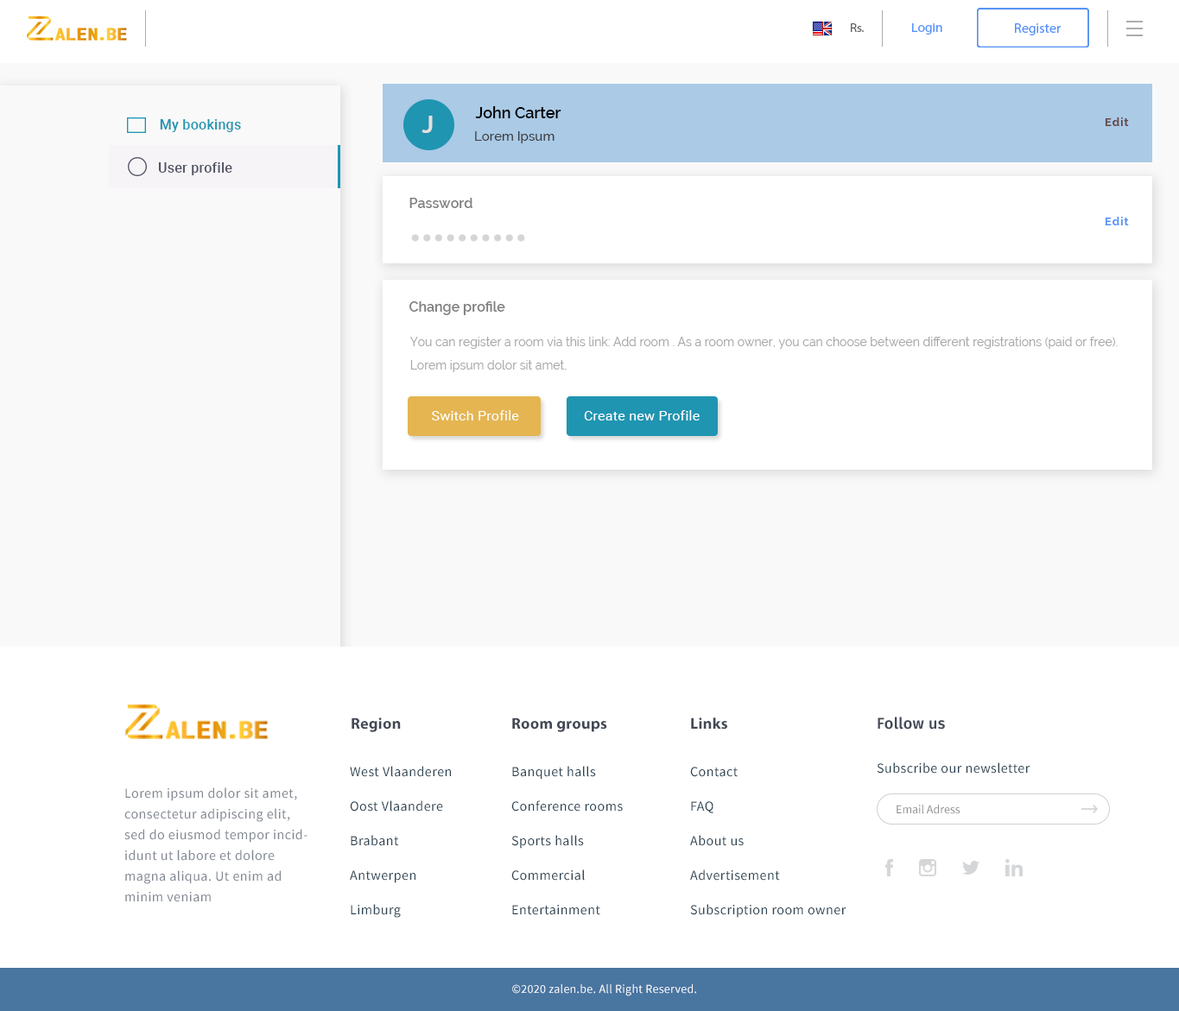
<style>
.page{position:relative;width:1179px;height:1011px;background:#ffffff}
.page>*{position:absolute;margin:0}
.t1{font:12.2px "MyriadPro-Regular";color:#636363;scale:1.04 1}
.t2{font:12.7px "MyriadPro-Regular";color:#5392f9;scale:1.07 1}
.t3{font:13.8px "MyriadPro-Regular";color:#5392f9}
.t4{font:15.5px "Raleway-SemiBold";color:#000000}
.t5{font:13.7px "Roboto-Medium";letter-spacing:0.02em;color:#1f95b1}
.t6{font:24.5px "Raleway-Bold";color:#e6e0e0}
.t7{font:11.2px "Raleway-Bold";letter-spacing:0.074em;color:#674646}
.t8{font:13px "Raleway-Medium";color:#3c3c3c}
.t9{font:13.7px "Roboto-Medium";letter-spacing:0.02em;color:#525364}
.t10{font:13.8px "Raleway-SemiBold";color:#817f7f}
.t11{font:11.2px "Raleway-Bold";letter-spacing:0.074em;color:#5392f9}
.t12{font:12.1px/23.3px "Raleway-Regular";color:#a8a7a7}
.t13{font:13px "Roboto-Regular";letter-spacing:0.02em;color:#ffffff;scale:1.06 1}
.t14{font:15.5px "MyriadPro-Bold";letter-spacing:0.02em;color:#424955}
.t15{font:15.5px "FiraSans-Medium";letter-spacing:0.02em;color:#424955}
.t16{font:13.8px/34.5px "SourceSansPro-Regular";letter-spacing:0.03em;color:#2e4453}
.t17{font:13.8px "SourceSansPro-Regular";letter-spacing:0.03em;color:#2e4453}
.t18{font:13.8px/20.7px "SourceSansPro-Regular";letter-spacing:0.03em;color:#818791}
.t19{font:12.1px "SourceSansPro-Regular";color:#8c8c8c}
.t20{font:12.1px "SourceSansPro-Regular";letter-spacing:0.02em;color:#ffffff}
</style>
<div class="page">
<p class="t1" style="left:851px;top:23px;width:13px;height:9px">Rs.</p>
<p class="t2" style="left:912px;top:23px;width:30px;height:12px">Login</p>
<p class="t3" style="left:1015px;top:23px;width:46px;height:12px">Register</p>
<p class="t4" style="left:475px;top:106px;width:86px;height:12px">John Carter</p>
<p class="t5" style="left:160px;top:119px;width:81px;height:13px">My bookings</p>
<p class="t6" style="left:421px;top:116px;width:12px;height:17px">J</p>
<p class="t7" style="left:1105px;top:117px;width:24px;height:9px">Edit</p>
<p class="t8" style="left:475px;top:131px;width:80px;height:12px">Lorem Ipsum</p>
<p class="t9" style="left:158px;top:162px;width:74px;height:13px">User profile</p>
<p class="t10" style="left:409px;top:198px;width:63px;height:10px">Password</p>
<p class="t11" style="left:1105px;top:217px;width:24px;height:8px">Edit</p>
<p class="t10" style="left:409px;top:301px;width:96px;height:14px">Change profile</p>
<p class="t12" style="left:409px;top:337px;width:709px;height:35px">You can register a room via this link: Add room . As a room owner, you can choose between different registrations (paid or free). Lorem ipsum dolor sit amet,</p>
<p class="t13" style="left:432px;top:410px;width:87px;height:11px">Switch Profile</p>
<p class="t13" style="left:584px;top:410px;width:116px;height:11px">Create new Profile</p>
<p class="t14" style="left:352px;top:718px;width:49px;height:14px">Region</p>
<p class="t14" style="left:512px;top:718px;width:95px;height:14px">Room groups</p>
<p class="t14" style="left:691px;top:718px;width:36px;height:12px">Links</p>
<p class="t15" style="left:878px;top:717px;width:67px;height:13px">Follow us</p>
<p class="t16" style="left:350px;top:766px;width:101px;height:152px">West Vlaanderen<br>Oost Vlaandere<br>Brabant<br>Antwerpen<br>Limburg</p>
<p class="t16" style="left:511px;top:766px;width:112px;height:150px">Banquet halls<br>Conference rooms<br>Sports halls<br>Commercial<br>Entertainment</p>
<p class="t16" style="left:690px;top:767px;width:156px;height:151px">Contact<br>FAQ<br>About us<br>Advertisement<br>Subscription room owner</p>
<p class="t17" style="left:877px;top:763px;width:153px;height:11px">Subscribe our newsletter</p>
<p class="t18" style="left:124px;top:788px;width:183px;height:115px">Lorem ipsum dolor sit amet, consectetur adipiscing elit, sed do eiusmod tempor incididunt ut labore et dolore magna aliqua. Ut enim ad minim veniam</p>
<p class="t19" style="left:897px;top:805px;width:63px;height:9px">Email Adress</p>
<p class="t20" style="left:512px;top:985px;width:184px;height:12px">©2020 zalen.be. All Right Reserved.</p>
</div>
